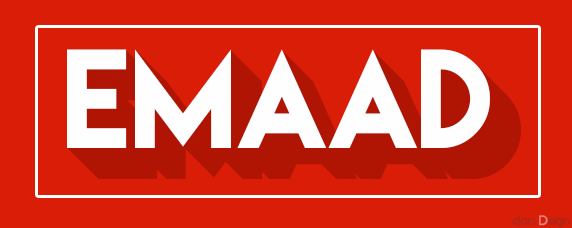
<style>
.page{position:relative;width:572px;height:228px;background:#d91d06}
.page>*{position:absolute;margin:0}
.t1{font:125px "LemonMilk";color:#fffefe}
.t2{font:125px "LemonMilk"}
.t3{font:14px "BlissfulThinking";color:#ab2519}
</style>
<div class="page">
<p class="t1" style="left:67px;top:49px;width:423px;height:99px">EMAAD</p>
<p class="t1" style="left:67px;top:49px;width:423px;height:99px">EMAAD</p>
<p class="t1" style="left:68px;top:50px;width:423px;height:99px">EMAAD</p>
<p class="t1" style="left:69px;top:51px;width:423px;height:99px">EMAAD</p>
<p class="t1" style="left:70px;top:52px;width:423px;height:99px">EMAAD</p>
<p class="t1" style="left:71px;top:53px;width:423px;height:99px">EMAAD</p>
<p class="t1" style="left:72px;top:54px;width:423px;height:99px">EMAAD</p>
<p class="t1" style="left:73px;top:55px;width:423px;height:99px">EMAAD</p>
<p class="t2" style="left:74px;top:56px;width:423px;height:99px">EMAAD</p>
<p class="t2" style="left:75px;top:57px;width:423px;height:99px">EMAAD</p>
<p class="t3" style="left:512px;top:215px;width:58px;height:13px">dan Dsign</p>
</div>
